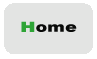
<style>
.page{position:relative;width:97px;height:59px;background:#e3e4e3}
.page>*{position:absolute;margin:0}
.t1{font:14px "Arial-Black";color:#090a09;scale:1.26 1}
.t2{font:11.6px "Arial-Black";color:#f70c0c;font-weight:bold;scale:1.26 1}
.t3{font:14px "Arial-Black";color:#2ea436;font-weight:bold;scale:1.26 1}
</style>
<div class="page">
<p class="t1" style="left:21px;top:21px;width:56px;height:11px"><span class="t2"><br></span><span class="t3">H</span>ome</p>
</div>
